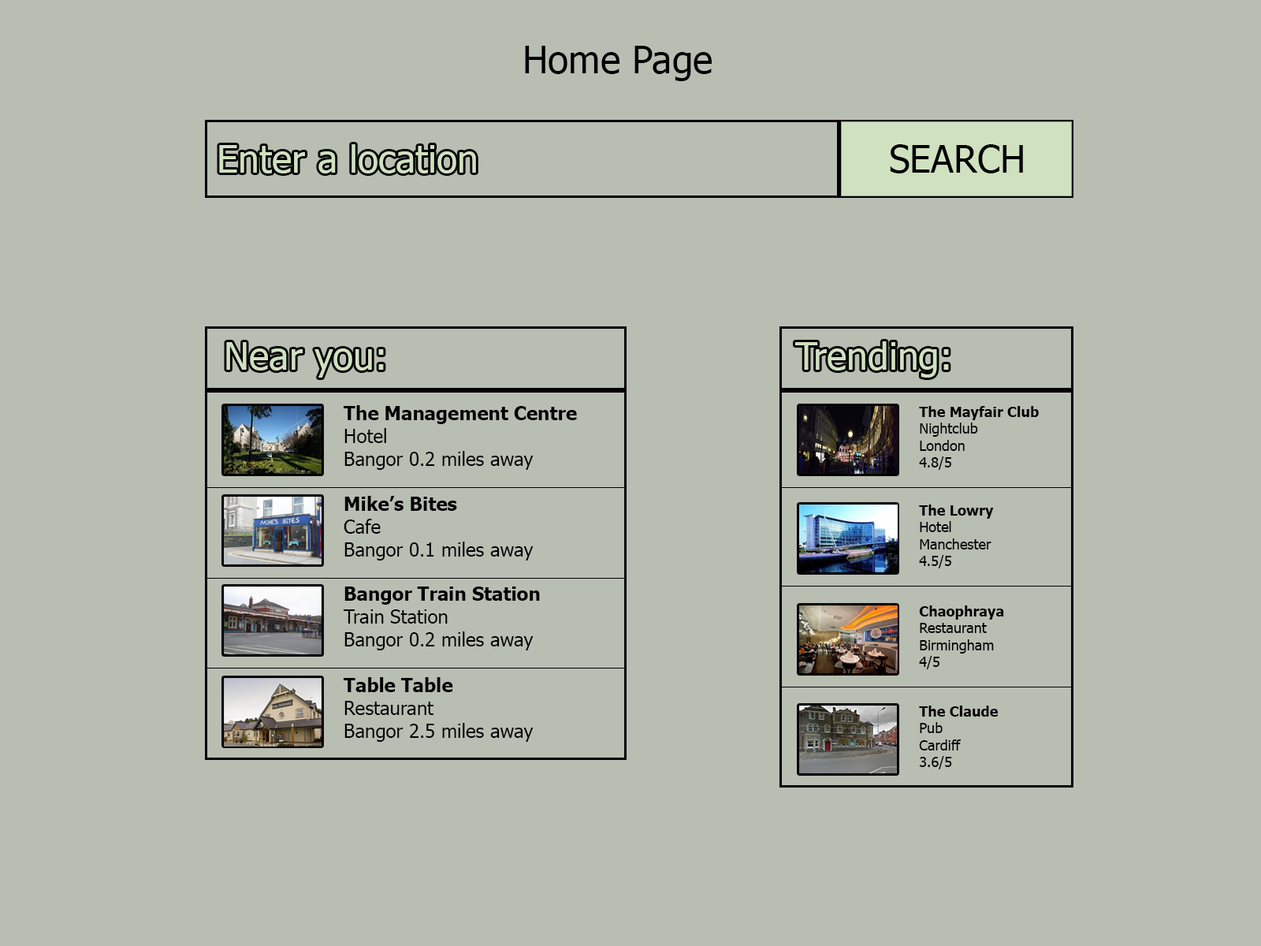
<style>
.page{position:relative;width:1261px;height:946px;background:#b9beb3}
.page>*{position:absolute;margin:0}
.t1{font:37.8px "Tahoma";color:#000000}
.t2{font:37.8px "Tahoma";color:#d0e1c0}
.t3{font:18.9px "Tahoma";color:#000000}
.t4{font:18.9px "Tahoma-Bold";color:#000000}
.t5{font:14.2px "Tahoma";color:#000000}
.t6{font:14.2px "Tahoma-Bold";color:#000000}
</style>
<div class="page">
<p class="t1" style="left:525px;top:46px;width:187px;height:35px">Home Page</p>
<p class="t2" style="left:219px;top:144px;width:257px;height:29px">Enter a location</p>
<p class="t1" style="left:890px;top:144px;width:133px;height:29px">SEARCH</p>
<p class="t2" style="left:795px;top:341px;width:154px;height:36px">Trending:</p>
<p class="t2" style="left:226px;top:342px;width:158px;height:35px">Near you:</p>
<p class="t3" style="left:344px;top:405px;width:233px;height:65px;text-align:right"><span class="t4">The Management Centre<br></span>Hotel<br>Bangor 0.2 miles away</p>
<p class="t5" style="left:919px;top:406px;width:120px;height:64px;text-align:right"><span class="t6">The Mayfair Club<br></span>Nightclub<br>London<br>4.8/5</p>
<p class="t3" style="left:344px;top:496px;width:190px;height:64px;text-align:right"><span class="t4">Mike’s Bites<br></span>Cafe<br>Bangor 0.1 miles away</p>
<p class="t5" style="left:919px;top:504px;width:75px;height:64px;text-align:right"><span class="t6">The Lowry<br></span>Hotel<br>Manchester<br>4.5/5</p>
<p class="t3" style="left:344px;top:586px;width:196px;height:64px;text-align:right"><span class="t4">Bangor Train Station<br></span>Train Station<br>Bangor 0.2 miles away</p>
<p class="t5" style="left:919px;top:605px;width:85px;height:64px;text-align:right"><span class="t6">Chaophraya<br></span>Restaurant<br>Birmingham<br>4/5</p>
<p class="t3" style="left:344px;top:677px;width:190px;height:65px;text-align:right"><span class="t4">Table Table<br></span>Restaurant<br>Bangor 2.5 miles away</p>
<p class="t5" style="left:919px;top:705px;width:79px;height:64px;text-align:right"><span class="t6">The Claude<br></span>Pub<br>Cardiff<br>3.6/5</p>
</div>
